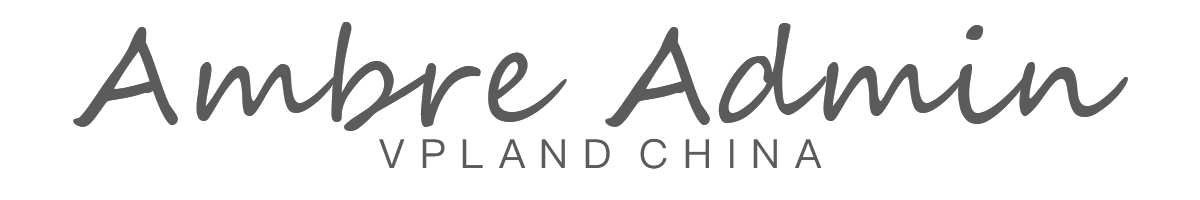
<style>
.page{position:relative;width:1200px;height:200px;background:#ffffff}
.page>*{position:absolute;margin:0}
.t1{font:130px "SegoeScript";letter-spacing:0.02em;color:#5b5b5b}
.t2{font:40px "PingFang-SC-Medium";letter-spacing:0.02em;color:#5b5b5b}
</style>
<div class="page">
<p class="t1" style="left:73px;top:22px;width:1055px;height:109px">Ambre Admin</p>
<p class="t2" style="left:379px;top:138px;width:443px;height:31px">V P L A N D  C H I N A</p>
</div>
